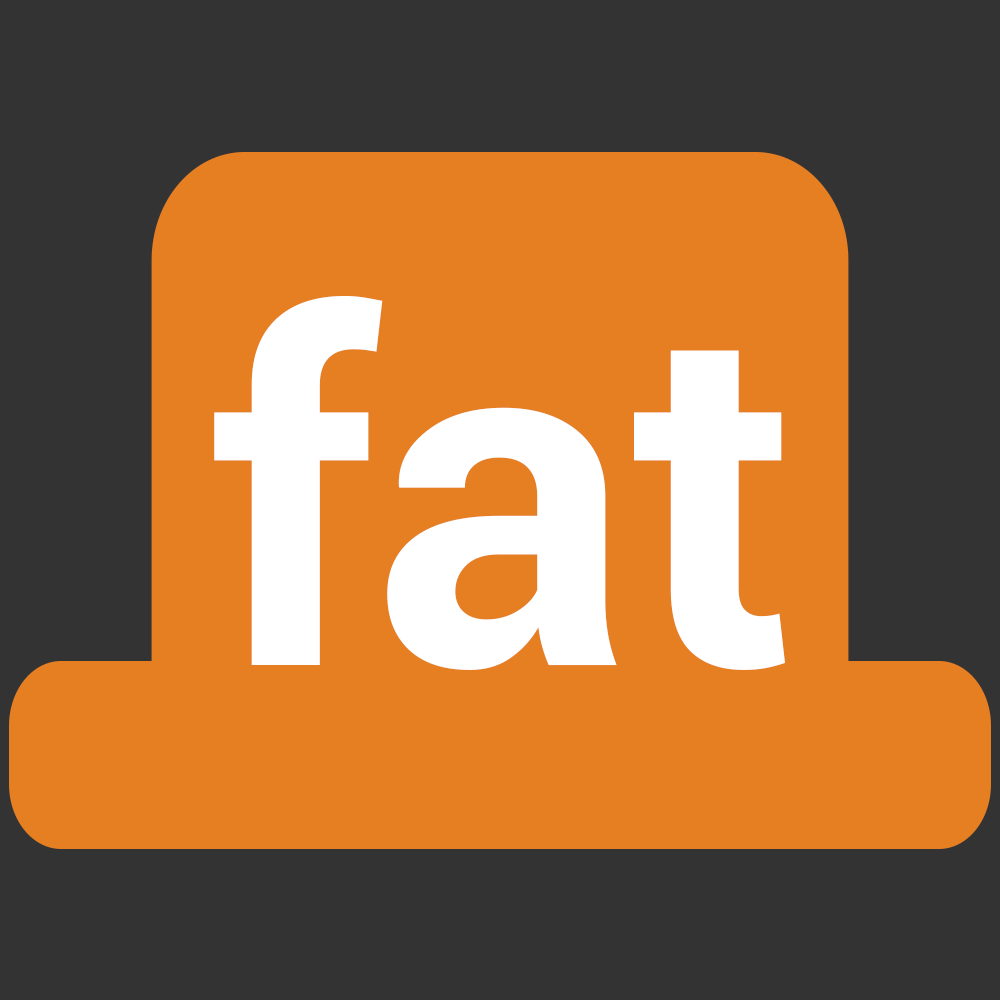
<style>
.page{position:relative;width:1000px;height:1000px;background:#333333}
.page>*{position:absolute;margin:0}
.t1{font:477.6px "Roboto-Bold";color:#ffffff}
</style>
<div class="page">
<p class="t1" style="left:214px;top:296px;width:571px;height:374px">fat</p>
</div>
